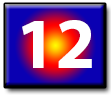
<style>
.page{position:relative;width:111px;height:96px}
.page>*{position:absolute;margin:0}
.t1{font:72px "MyriadPro-Bold";color:#ffffff}
</style>
<div class="page">
<p class="t1" style="left:22px;top:20px;width:70px;height:48px">12</p>
</div>
